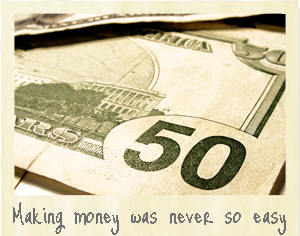
<style>
.page{position:relative;width:300px;height:236px}
.page>*{position:absolute;margin:0}
.t1{font:36px "JustMeAgainDownHere";color:#707070}
</style>
<div class="page">
<p class="t1" style="left:13px;top:202px;width:273px;height:33px">Making money was never so easy</p>
</div>
